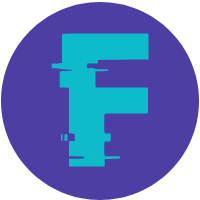
<style>
.page{position:relative;width:200px;height:200px;background:#4d3ea4}
.page>*{position:absolute;margin:0}
.t1{font:148px "DoctorGlitch";color:#0dbbca}
</style>
<div class="page">
<p class="t1" style="left:51px;top:33px;width:98px;height:134px">F</p>
</div>
